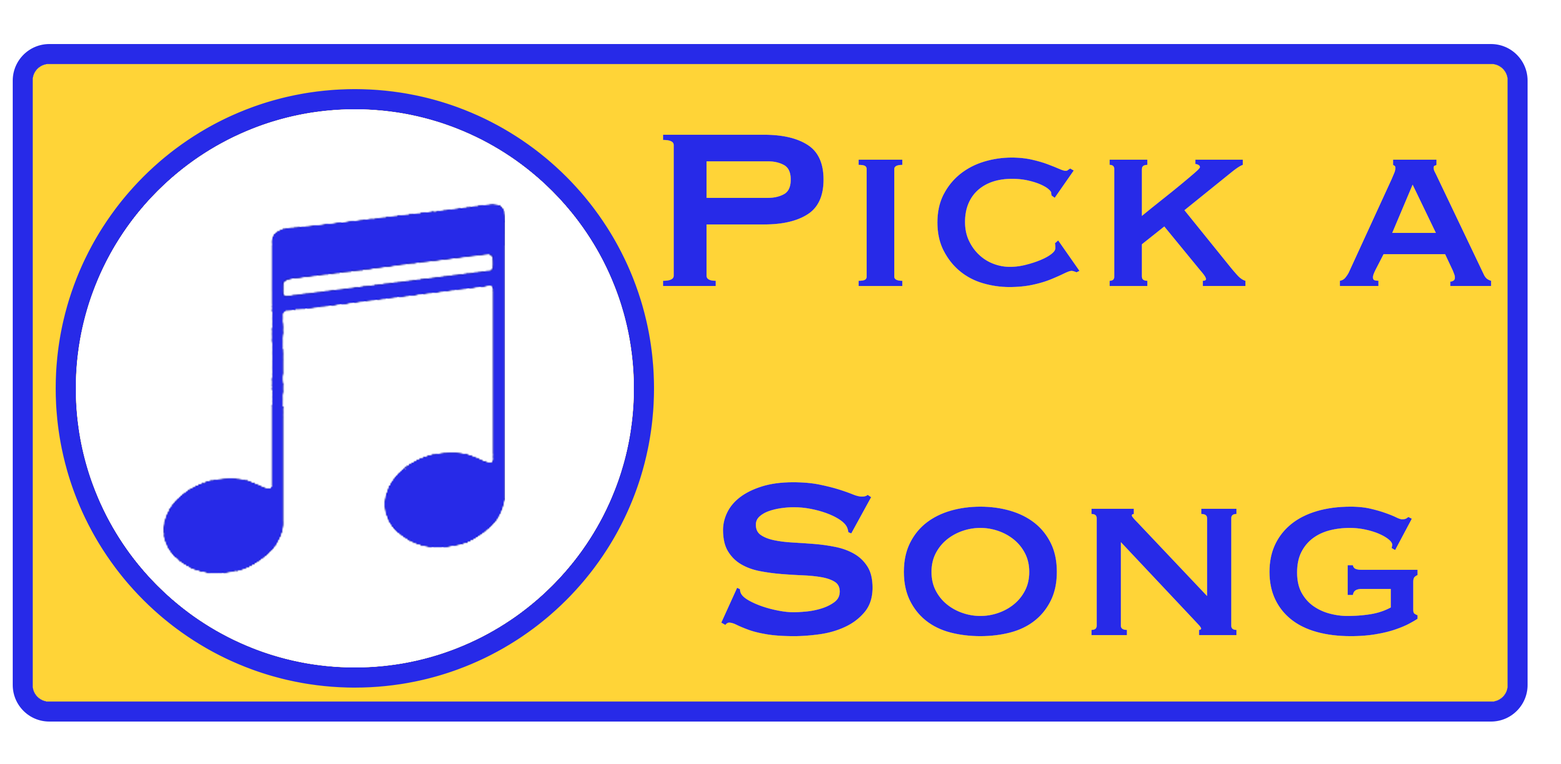
<style>
.page{position:relative;width:1561px;height:764px;background:#ffd437}
.page>*{position:absolute;margin:0}
.t1{font:287.3px "Copperplate";color:#272ae8}
</style>
<div class="page">
<p class="t1" style="left:663px;top:135px;width:829px;height:501px;text-align:center">Pick a<br>Song</p>
</div>
